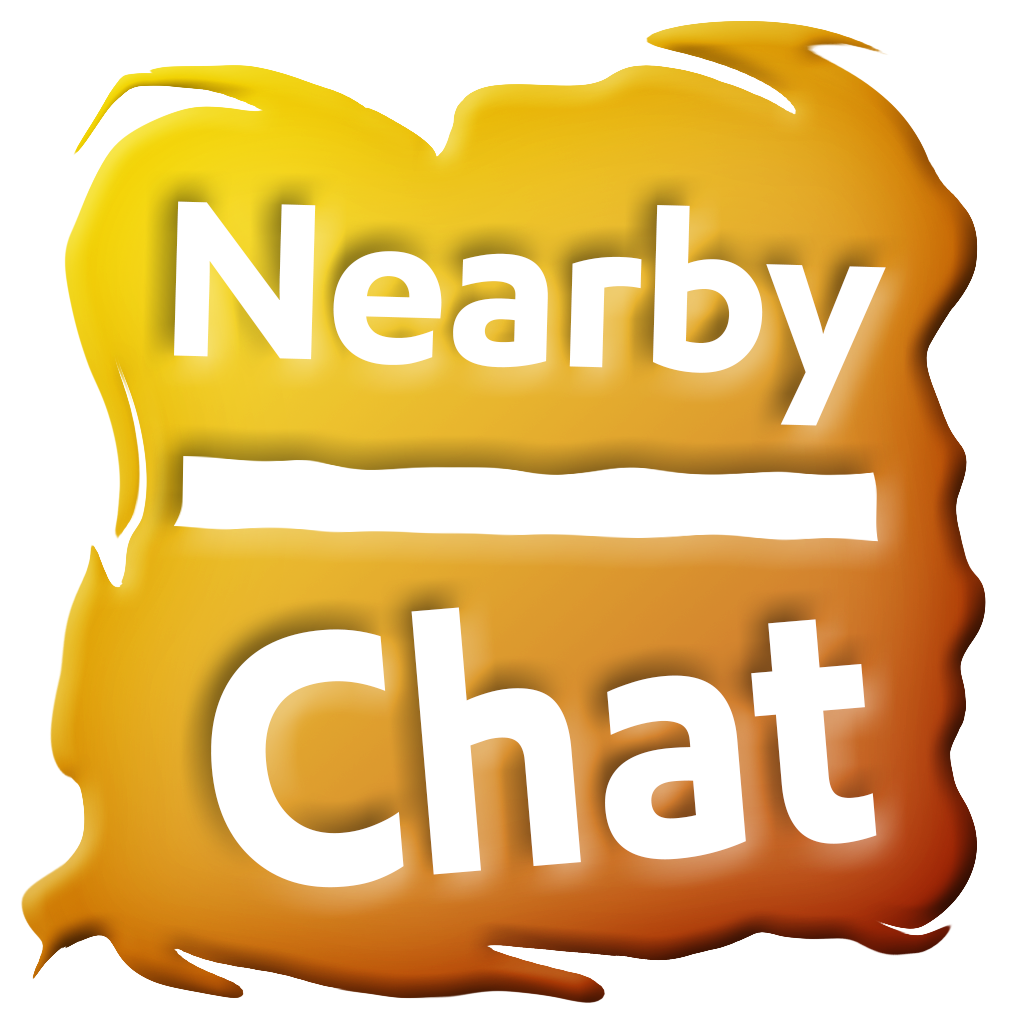
<style>
.page{position:relative;width:1024px;height:1024px;background:#ffffff}
.page>*{position:absolute;margin:0}
.t1{font:221.2px "EMprint-Bold";color:#ffffff}
.t2{font:357.5px "EMprint-Bold";color:#ffffff;scale:0.91 1}
</style>
<div class="page">
<p class="t1" style="left:174px;top:201px;width:712px;height:225px;rotate:2deg">Nearby</p>
<p class="t2" style="left:211px;top:607px;width:666px;height:281px;rotate:-5deg">Chat</p>
</div>
